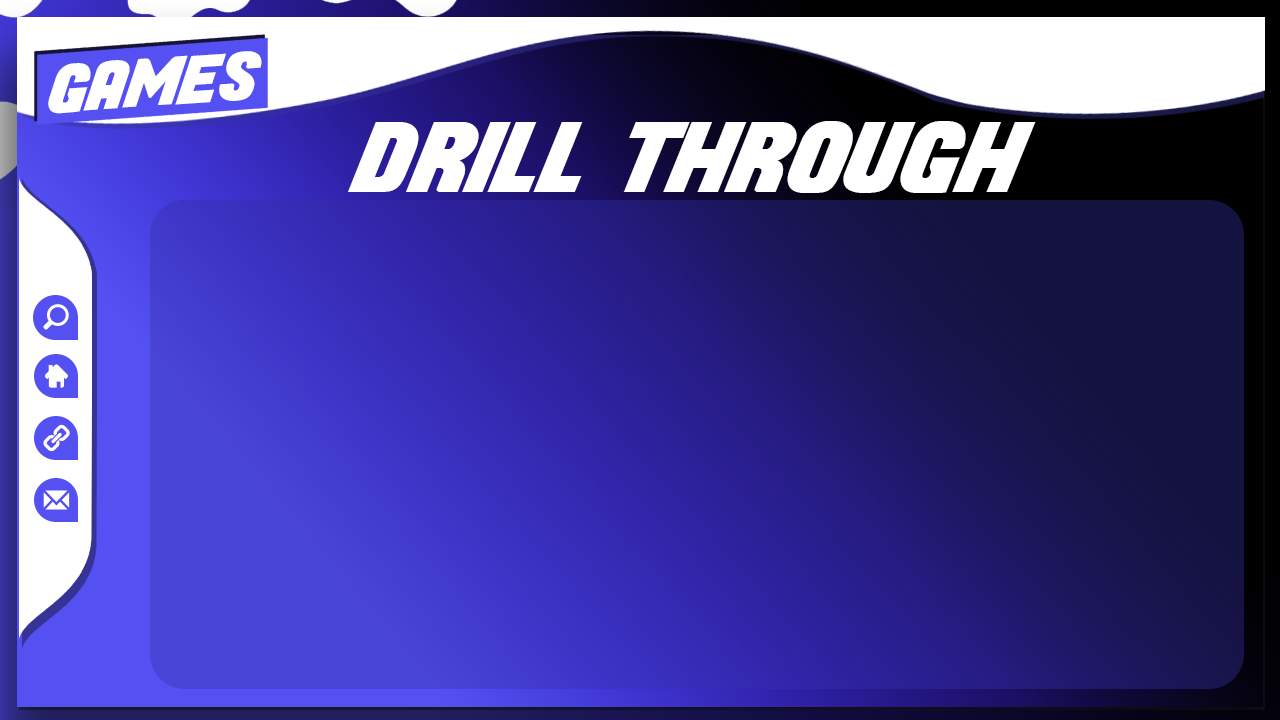
<style>
.page{position:relative;width:1280px;height:720px}
.page>*{position:absolute;margin:0}
.t1{font:64.4px "Longhaul";color:#ffffff}
.t2{font:95.2px "Longhaul";color:#ffffff}
</style>
<div class="page">
<p class="t1" style="left:48px;top:51px;width:214px;height:63px;rotate:-4deg">GAMES</p>
<p class="t2" style="left:348px;top:121px;width:688px;height:72px">DRILL THROUGH</p>
</div>
